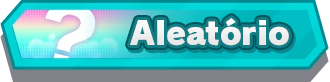
<style>
.page{position:relative;width:330px;height:82px}
.page>*{position:absolute;margin:0}
.t1{font:32px "RodinPro-UB";letter-spacing:-0.006em;color:#eff0f0}
</style>
<div class="page">
<p class="t1" style="left:130px;top:18px;width:159px;height:28px">Aleatório</p>
</div>
